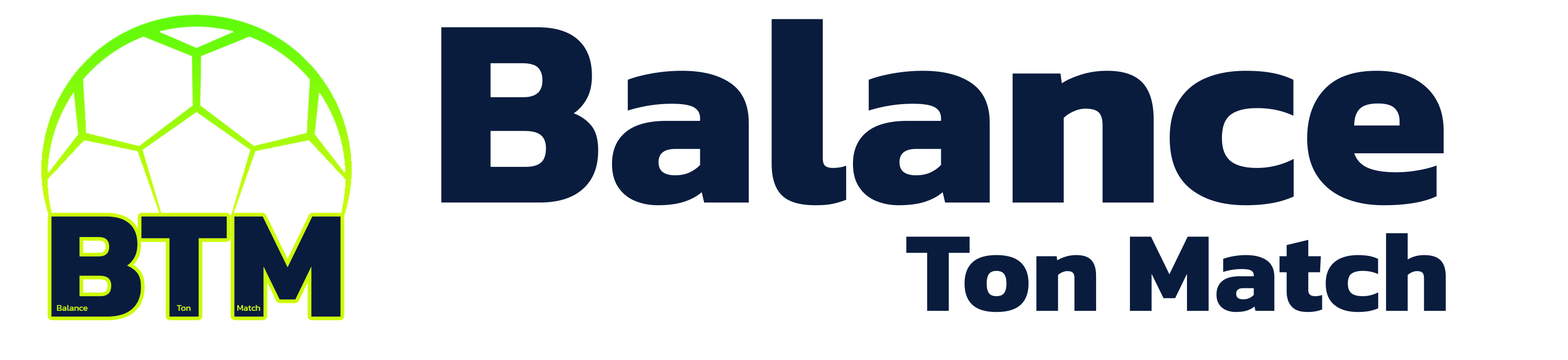
<style>
.page{position:relative;width:1568px;height:360px;background:#ffffff}
.page>*{position:absolute;margin:0}
.t1{font:271.8px "Kanit-Bold";color:#091c3e}
.t2{font:155px "Kanit-Bold";color:#091c3e}
.t3{font:115.1px "Kanit-Bold";color:#091c3e}
.t4{font:8.7px "Kanit-Regular";color:#cdfb0a}
</style>
<div class="page">
<p class="t1" style="left:441px;top:19px;width:1003px;height:186px">Balance</p>
<p class="t2" style="left:51px;top:216px;width:290px;height:100px">BTM</p>
<p class="t3" style="left:906px;top:233px;width:540px;height:79px">Ton Match</p>
<p class="t4" style="left:57px;top:305px;width:31px;height:5px">Balance</p>
<p class="t4" style="left:177px;top:305px;width:14px;height:5px">Ton</p>
<p class="t4" style="left:237px;top:305px;width:23px;height:5px">Match</p>
</div>
